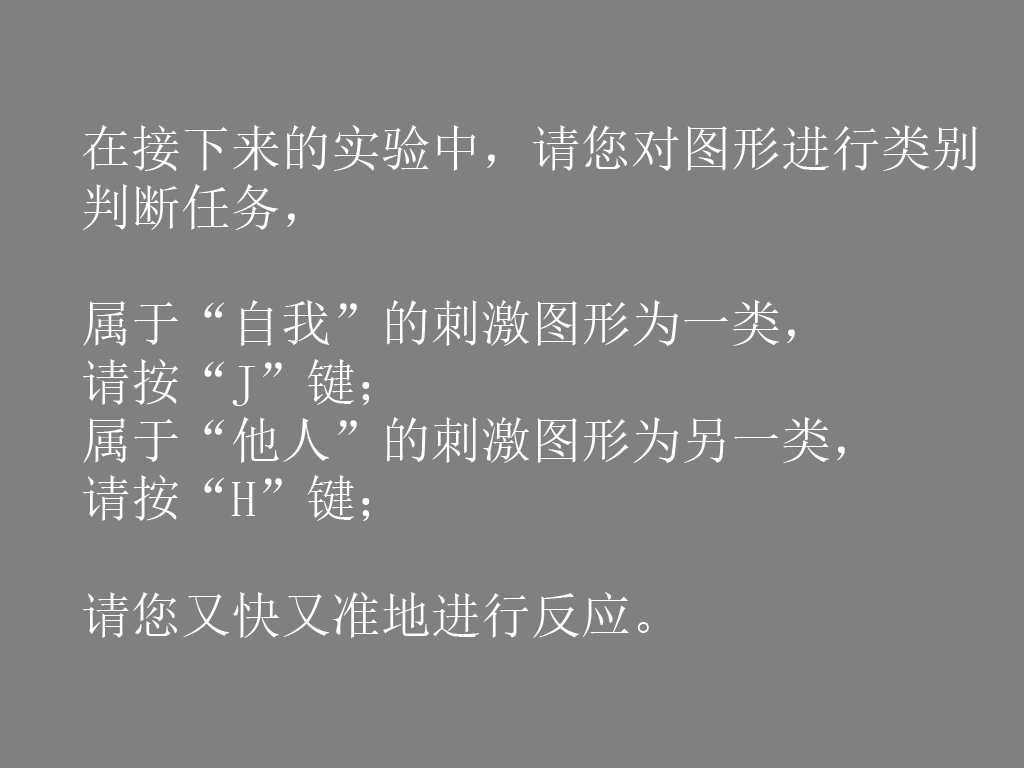
<style>
.page{position:relative;width:1024px;height:768px;background:#808080}
.page>*{position:absolute;margin:0}
.t1{font:50px/58.3px "SimSun";color:#ffffff}
</style>
<div class="page">
<p class="t1" style="left:82px;top:125px;width:895px;height:513px">在接下来的实验中，请您对图形进行类别<br>判断任务，<br><br>属于“自我”的刺激图形为一类，<br>请按“J”键；<br>属于“他人”的刺激图形为另一类，<br>请按“H”键；<br><br>请您又快又准地进行反应。</p>
</div>
